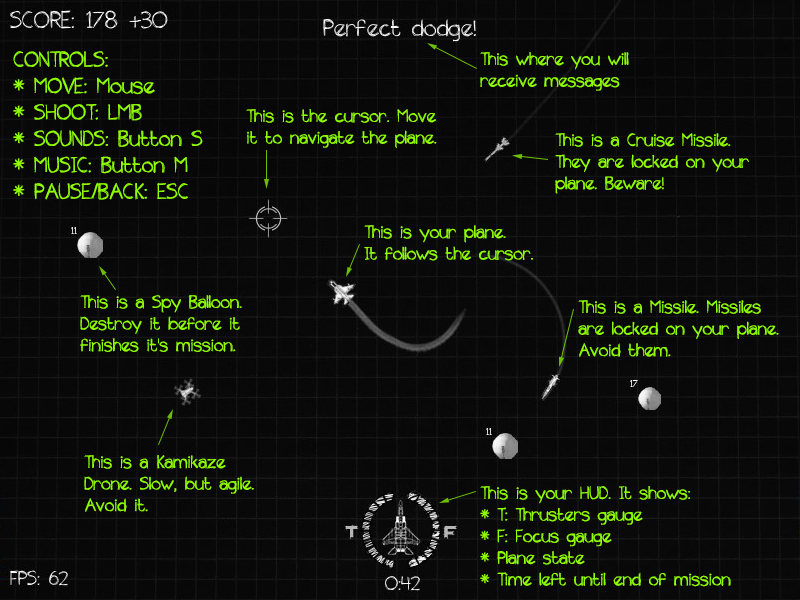
<style>
.page{position:relative;width:800px;height:600px;background:#080808}
.page>*{position:absolute;margin:0}
.t1{font:22px "theunseen";color:#90ff00}
.t2{font:18px "theunseen";color:#90ff00}
</style>
<div class="page">
<p class="t1" style="left:13px;top:51px;width:190px;height:149px">CONTROLS:<br>* MOVE: Mouse<br>* SHOOT: LMB<br>* SOUNDS: Button S<br>* MUSIC: Button M<br>* PAUSE/BACK: ESC</p>
<p class="t2" style="left:480px;top:52px;width:149px;height:39px">This where you will receive messages</p>
<p class="t2" style="left:246px;top:109px;width:191px;height:39px">This is the cursor. Move it to navigate the plane.</p>
<p class="t2" style="left:555px;top:133px;width:194px;height:61px">This is a Cruise Missile. They are locked on your plane. Beware!</p>
<p class="t2" style="left:364px;top:225px;width:169px;height:36px">This is your plane.<br>It follows the cursor.</p>
<p class="t2" style="left:80px;top:295px;width:162px;height:57px">This is a Spy Balloon. Destroy it before it finishes it's mission.</p>
<p class="t2" style="left:578px;top:300px;width:201px;height:57px">This is a Missile. Missiles are locked on your plane. Avoid them.</p>
<p class="t2" style="left:84px;top:455px;width:170px;height:57px">This is a Kamikaze Drone. Slow, but agile. Avoid it.</p>
<p class="t2" style="left:480px;top:486px;width:251px;height:101px">This is your HUD. It shows:<br>* T: Thrusters gauge<br>* F: Focus gauge<br>* Plane state<br>* Time left until end of mission<br>*</p>
</div>
